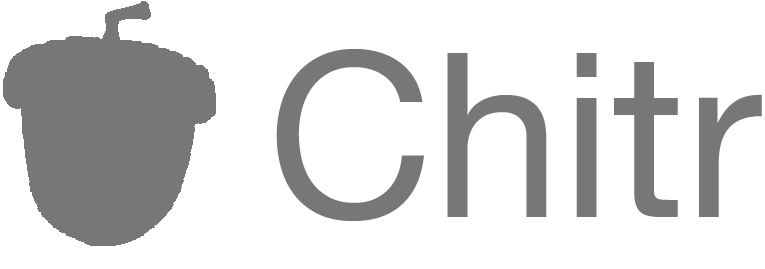
<style>
.page{position:relative;width:765px;height:269px;background:#ffffff}
.page>*{position:absolute;margin:0}
.t1{font:230px "HelveticaNeue";color:#777777}
</style>
<div class="page">
<p class="t1" style="left:276px;top:49px;width:486px;height:172px">Chitr</p>
</div>
